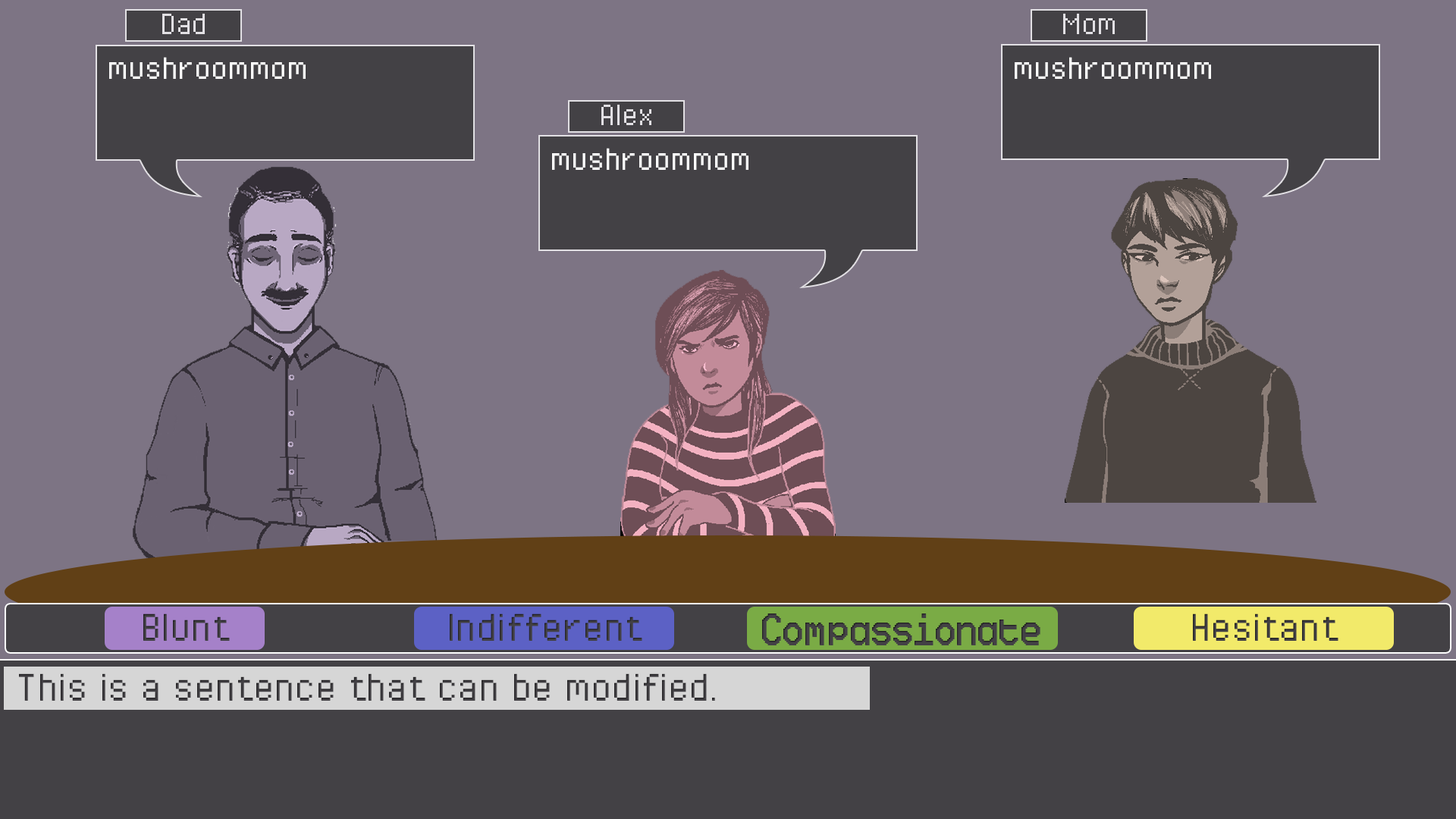
<style>
.page{position:relative;width:1456px;height:819px;background:#7d7484}
.page>*{position:absolute;margin:0}
.t1{font:36.3px "PixelOperator";color:#e2e0e4}
.t2{font:37.9px "PixelOperator";color:#ffffff}
.t3{font:47.4px "PixelOperator";color:#434145}
.t4{font:47.4px "Ticketing";color:#434145}
</style>
<div class="page">
<p class="t1" style="left:162px;top:14px;width:43px;height:20px">Dad</p>
<p class="t1" style="left:1063px;top:14px;width:52px;height:20px">Mom</p>
<p class="t2" style="left:109px;top:57px;width:197px;height:22px">mushroommom</p>
<p class="t2" style="left:1015px;top:57px;width:196px;height:22px">mushroommom</p>
<p class="t1" style="left:601px;top:105px;width:50px;height:20px">Alex</p>
<p class="t2" style="left:552px;top:148px;width:196px;height:22px">mushroommom</p>
<p class="t3" style="left:143px;top:613px;width:87px;height:28px">Blunt</p>
<p class="t3" style="left:450px;top:613px;width:192px;height:28px">Indifferent</p>
<p class="t4" style="left:762px;top:613px;width:278px;height:32px">Compassionate</p>
<p class="t3" style="left:1193px;top:613px;width:145px;height:28px">Hesitant</p>
<p class="t3" style="left:19px;top:673px;width:696px;height:28px">This is a sentence that can be modified.</p>
</div>
